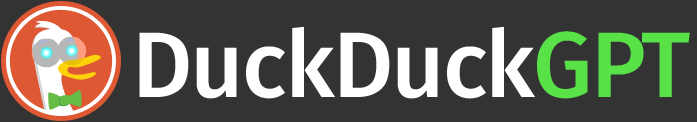
<style>
.page{position:relative;width:697px;height:122px;background:#333333}
.page>*{position:absolute;margin:0}
.t1{font:93px "FiraSans-Medium";letter-spacing:-0.02em;color:#ffffff}
.t2{font:93px "FiraSans-Medium";letter-spacing:-0.02em;color:#59e247}
</style>
<div class="page">
<p class="t1" style="left:139px;top:26px;width:551px;height:73px">DuckDuck<span class="t2">GPT</span></p>
</div>
